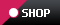
<style>
.page{position:relative;width:60px;height:25px;background:#d11d5a}
.page>*{position:absolute;margin:0}
.t1{font:12px "morris9";color:#ffffff;font-weight:bold}
</style>
<div class="page">
<p class="t1" style="left:22px;top:9px;width:28px;height:8px">SHOP</p>
</div>
